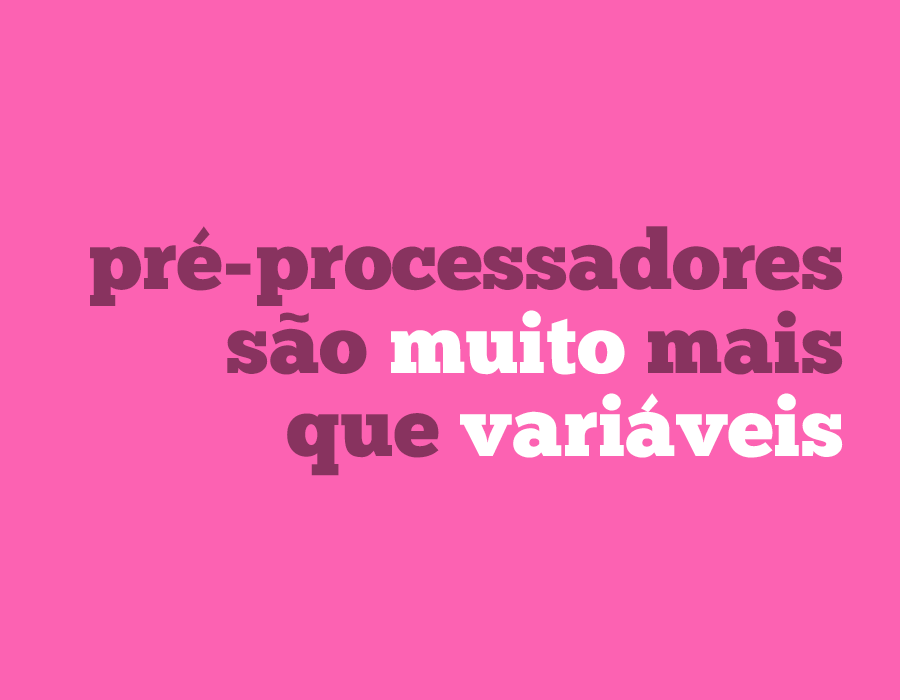
<style>
.page{position:relative;width:900px;height:700px;background:#fc62b2}
.page>*{position:absolute;margin:0}
.t1{font:83.5px/83.5px "ChunkFive-Roman";color:#88335f}
.t2{font:83.5px/83.5px "ChunkFive-Roman";color:#ffffff}
.t3{font:72.7px "ChunkFive-Roman";color:#88335f}
</style>
<div class="page">
<p class="t1" style="left:90px;top:226px;width:753px;height:250px;text-align:right">pré-processadores<br>sao <span class="t2">muito</span> mais<br>que <span class="t2">variáveis</span></p>
<p class="t3" style="left:280px;top:312px;width:29px;height:11px">~</p>
</div>
